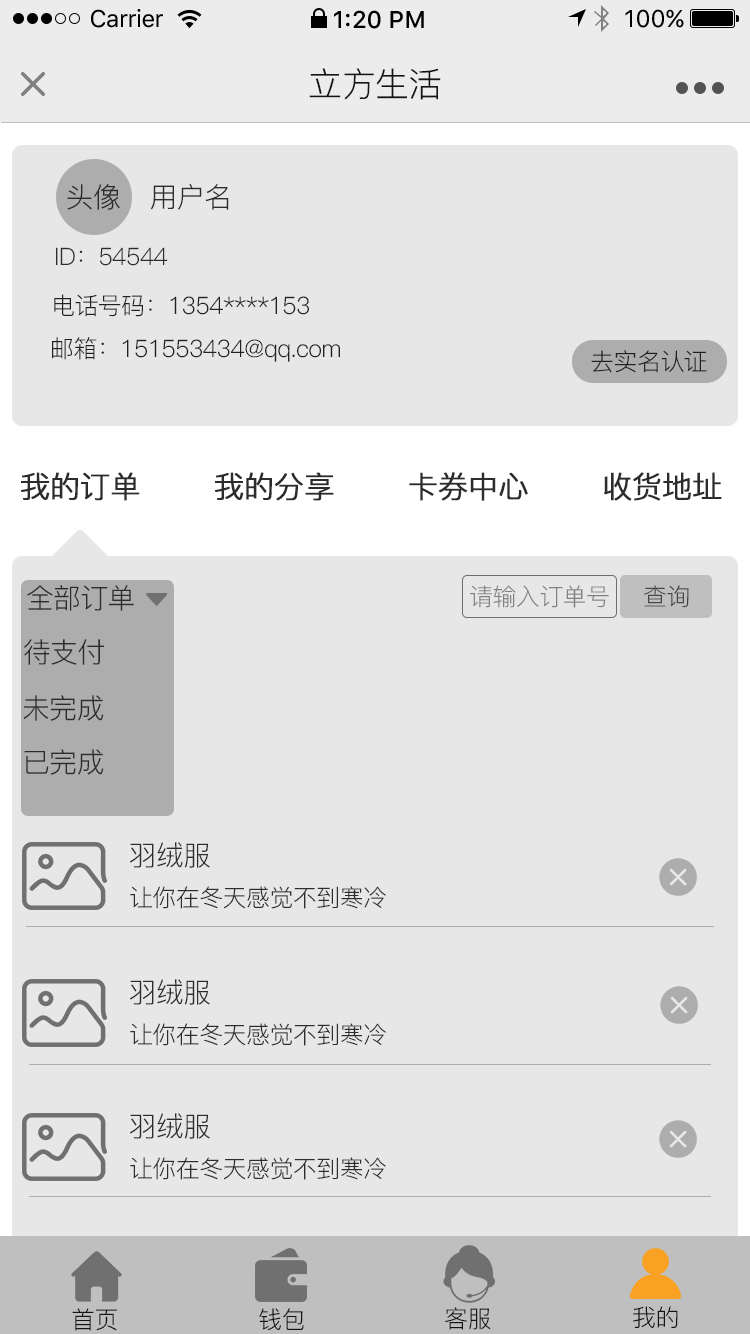
<style>
.page{position:relative;width:750px;height:1334px;background:#e7e7e7}
.page>*{position:absolute;margin:0}
.t1{font:24px "SFUIText-Regular";letter-spacing:-0.025em;color:#000000}
.t2{font:24px "SFUIText-Medium";color:#000000}
.t3{font:24px "SFUIText-Regular";color:#000000}
.t4{font:34px "PingFang-SC-Regular";letter-spacing:-0.02em;color:#141414}
.t5{font:28px "PingFang-SC-Regular";letter-spacing:-0.024em;color:#2c2c2c}
.t6{font:24px "PingFang-SC-Regular";letter-spacing:-0.024em;color:#2c2c2c}
.t7{font:24px "PingFang-SC-Regular";letter-spacing:-0.024em;color:#212121}
.t8{font:30px "PingFang-SC-Regular";letter-spacing:-0.024em;color:#2c2c2c;font-weight:bold}
.t9{font:24px "PingFang-SC-Regular";letter-spacing:-0.024em;color:#818181}
.t10{font:24px "PingFang-SC-Regular";letter-spacing:-0.024em;color:#444444}
.t11{font:27.9px "PingFang-SC-Regular";letter-spacing:-0.024em;color:#2c2c2c}
.t12{font:27.8px "PingFang-SC-Regular";letter-spacing:-0.024em;color:#2c2c2c}
.t13{font:23.9px "PingFang-SC-Regular";letter-spacing:-0.024em;color:#2c2c2c}
.t14{font:24px "PingFang-SC-Regular";letter-spacing:-0.02em;color:#141414}
</style>
<div class="page">
<p class="t1" style="left:91px;top:9px;width:72px;height:19px">Carrier</p>
<p class="t2" style="left:334px;top:10px;width:90px;height:19px">1:20 PM</p>
<p class="t3" style="left:625px;top:9px;width:59px;height:19px">100%</p>
<p class="t4" style="left:309px;top:68px;width:132px;height:32px">立方生活</p>
<p class="t5" style="left:67px;top:184px;width:53px;height:26px">头像</p>
<p class="t5" style="left:150px;top:184px;width:79px;height:26px">用户名</p>
<p class="t6" style="left:56px;top:247px;width:112px;height:19px">ID：54544</p>
<p class="t7" style="left:54px;top:294px;width:255px;height:23px">电话号码：1354****153</p>
<p class="t7" style="left:52px;top:337px;width:288px;height:25px">邮箱：151553434@qq.com</p>
<p class="t7" style="left:591px;top:350px;width:116px;height:23px">去实名认证</p>
<p class="t8" style="left:21px;top:472px;width:119px;height:29px">我的订单</p>
<p class="t8" style="left:215px;top:472px;width:119px;height:29px">我的分享</p>
<p class="t8" style="left:409px;top:472px;width:119px;height:29px">卡券中心</p>
<p class="t8" style="left:604px;top:472px;width:118px;height:29px">收货地址</p>
<p class="t5" style="left:27px;top:585px;width:107px;height:26px">全部订单</p>
<p class="t9" style="left:470px;top:585px;width:139px;height:23px">请输入订单号</p>
<p class="t10" style="left:644px;top:585px;width:45px;height:23px">查询</p>
<p class="t11" style="left:24px;top:639px;width:80px;height:26px">待支付</p>
<p class="t11" style="left:23px;top:695px;width:81px;height:26px">未完成</p>
<p class="t11" style="left:24px;top:749px;width:80px;height:26px">已完成</p>
<p class="t12" style="left:130px;top:842px;width:80px;height:26px">羽绒服</p>
<p class="t13" style="left:130px;top:886px;width:256px;height:23px">让你在冬天感觉不到寒冷</p>
<p class="t12" style="left:130px;top:979px;width:80px;height:26px">羽绒服</p>
<p class="t13" style="left:130px;top:1023px;width:256px;height:23px">让你在冬天感觉不到寒冷</p>
<p class="t12" style="left:130px;top:1113px;width:80px;height:26px">羽绒服</p>
<p class="t13" style="left:130px;top:1157px;width:256px;height:23px">让你在冬天感觉不到寒冷</p>
<p class="t14" style="left:72px;top:1308px;width:45px;height:23px">首页</p>
<p class="t14" style="left:259px;top:1308px;width:45px;height:23px">钱包</p>
<p class="t14" style="left:445px;top:1307px;width:46px;height:23px">客服</p>
<p class="t14" style="left:633px;top:1306px;width:45px;height:22px">我的</p>
</div>
